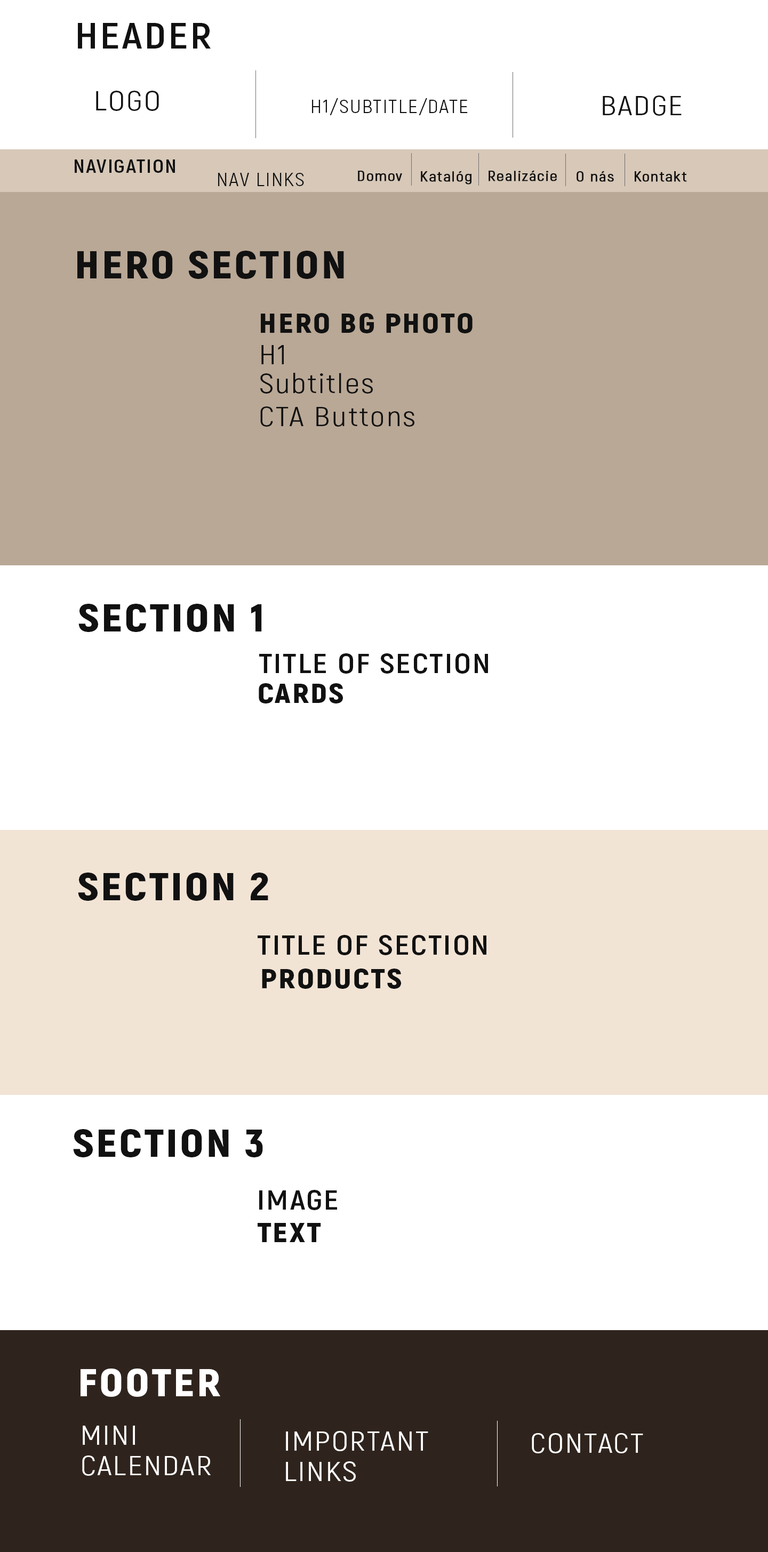
<style>
.page{position:relative;width:768px;height:1552px;background:#ffffff}
.page>*{position:absolute;margin:0}
.t1{font:36.9px "Akrobat-Bold";letter-spacing:0.05em;color:#111111;scale:1.16 1}
.t2{font:27.7px "Akrobat-Regular";letter-spacing:0.05em;color:#111111;scale:1.16 1}
.t3{font:18.4px "Akrobat-Regular";letter-spacing:0.05em;color:#111111;scale:1.16 1}
.t4{font:18.4px "Akrobat-Bold";letter-spacing:0.05em;color:#111111;scale:1.16 1}
.t5{font:18.4px "Akrobat-Regular";letter-spacing:0.05em;color:#111111;text-transform:uppercase;scale:1.16 1}
.t6{font:13.8px "Akrobat-Regular";letter-spacing:0.05em;color:#111111;font-weight:bold;scale:1.16 1}
.t7{font:13.8px "Akrobat-Regular";letter-spacing:0.05em;color:#111111;text-transform:uppercase;font-weight:bold;scale:1.16 1}
.t8{font:38.6px "Akrobat-Black";letter-spacing:0.05em;color:#111111;scale:1.16 1}
.t9{font:27.7px "Akrobat-Black";letter-spacing:0.05em;color:#111111;scale:1.16 1}
.t10{font:27.7px "Akrobat-Bold";letter-spacing:0.05em;color:#111111;scale:1.16 1}
.t11{font:38.6px "Akrobat-Black";letter-spacing:0.05em;color:#ffffff;scale:1.16 1}
.t12{font:27.7px "Akrobat-Regular";letter-spacing:0.05em;color:#ffffff;scale:1.16 1}
</style>
<div class="page">
<p class="t1" style="left:78px;top:23px;width:133px;height:26px">HEADER</p>
<p class="t2" style="left:96px;top:91px;width:63px;height:20px">LOGO</p>
<p class="t3" style="left:312px;top:98px;width:156px;height:17px">H1/SUBTITLE/DATE</p>
<p class="t2" style="left:603px;top:95px;width:79px;height:21px">BADGE</p>
<p class="t4" style="left:75px;top:159px;width:100px;height:14px">NAVIGATION</p>
<p class="t5" style="left:218px;top:173px;width:86px;height:13px">NAV LINKS</p>
<p class="t6" style="left:358px;top:171px;width:44px;height:10px"><span class="t7">D</span>omov</p>
<p class="t6" style="left:421px;top:171px;width:51px;height:14px">Katalóg</p>
<p class="t6" style="left:489px;top:171px;width:68px;height:10px">Realizácie</p>
<p class="t6" style="left:577px;top:171px;width:37px;height:11px">O nás</p>
<p class="t6" style="left:635px;top:171px;width:52px;height:11px">Kontakt</p>
<p class="t8" style="left:77px;top:251px;width:267px;height:28px">HERO SECTION</p>
<p class="t9" style="left:261px;top:313px;width:212px;height:20px">HERO BG PHOTO</p>
<p class="t2" style="left:261px;top:345px;width:23px;height:19px">H1</p>
<p class="t2" style="left:260px;top:373px;width:113px;height:21px">Subtitles</p>
<p class="t2" style="left:260px;top:406px;width:154px;height:21px">CTA Buttons</p>
<p class="t8" style="left:78px;top:604px;width:184px;height:28px">SECTION 1</p>
<p class="t10" style="left:259px;top:653px;width:229px;height:21px">TITLE OF SECTION</p>
<p class="t9" style="left:259px;top:683px;width:84px;height:21px">CARDS</p>
<p class="t8" style="left:78px;top:873px;width:190px;height:28px">SECTION 2</p>
<p class="t10" style="left:258px;top:935px;width:229px;height:20px">TITLE OF SECTION</p>
<p class="t9" style="left:262px;top:969px;width:139px;height:20px">PRODUCTS</p>
<p class="t8" style="left:73px;top:1129px;width:190px;height:29px">SECTION 3</p>
<p class="t10" style="left:259px;top:1190px;width:78px;height:20px">IMAGE</p>
<p class="t9" style="left:258px;top:1223px;width:63px;height:19px">TEXT</p>
<p class="t11" style="left:81px;top:1369px;width:139px;height:28px">FOOTER</p>
<p class="t12" style="left:82px;top:1426px;width:129px;height:50px">MINI <br>CALENDAR</p>
<p class="t12" style="left:286px;top:1431px;width:142px;height:51px">IMPORTANT<br>LINKS</p>
<p class="t12" style="left:532px;top:1433px;width:111px;height:21px">CONTACT</p>
</div>
